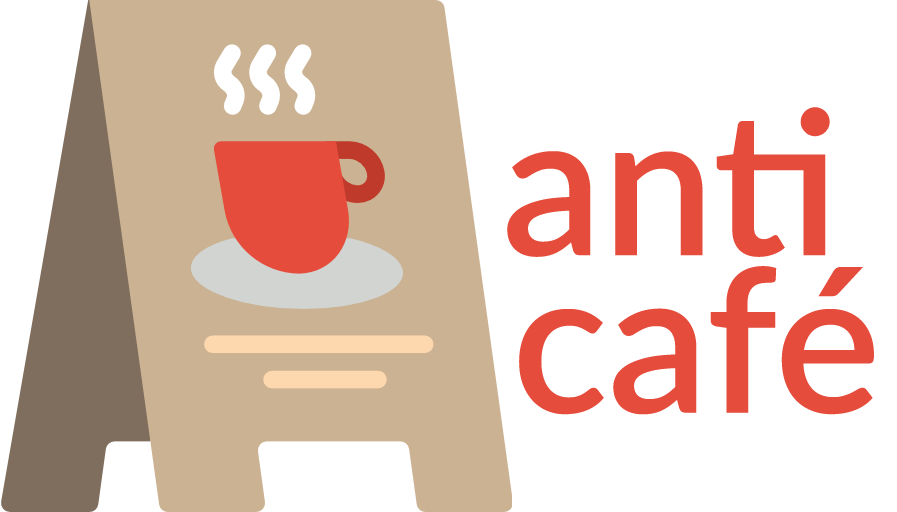
<style>
.page{position:relative;width:897px;height:512px;background:#ffffff}
.page>*{position:absolute;margin:0}
.t1{font:200px "Lato-Semibold";color:#e64c3c}
</style>
<div class="page">
<p class="t1" style="left:507px;top:107px;width:323px;height:150px">anti</p>
<p class="t1" style="left:519px;top:266px;width:355px;height:149px">café</p>
</div>
